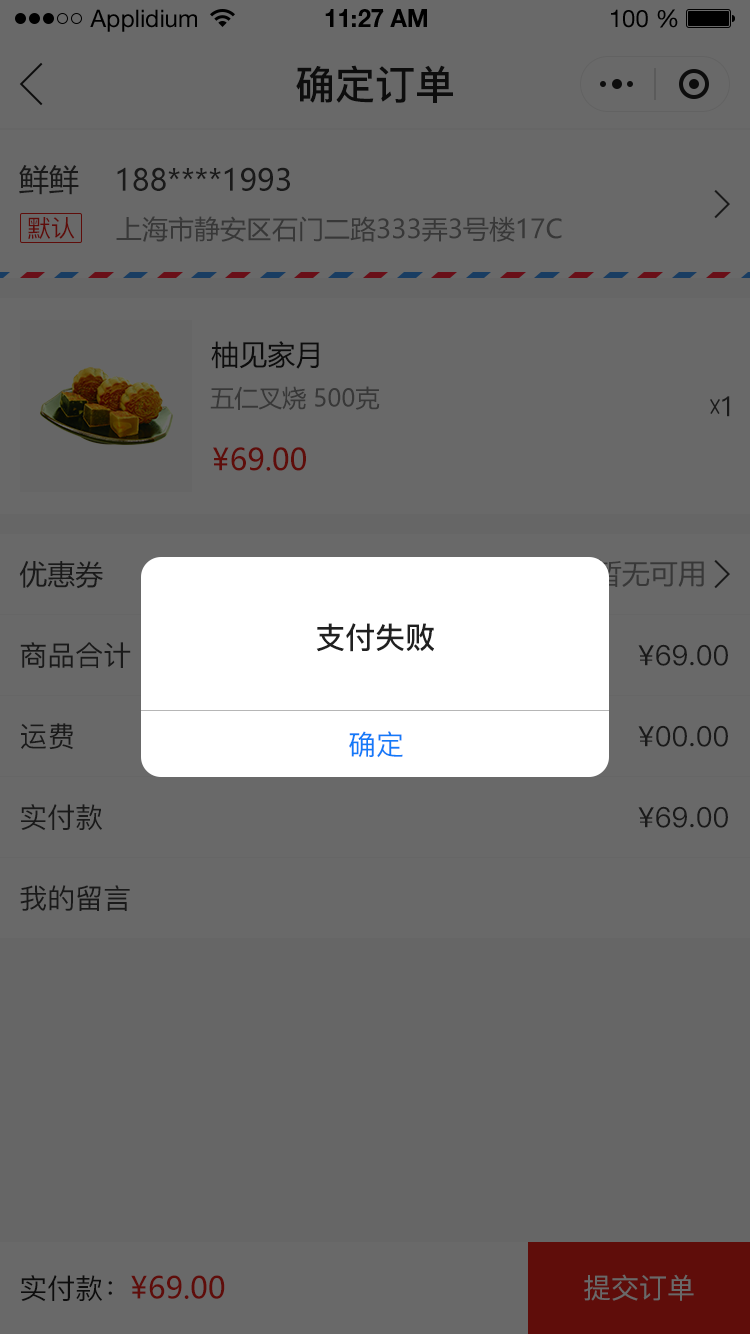
<style>
.page{position:relative;width:750px;height:1334px;background:#696969}
.page>*{position:absolute;margin:0}
.t1{font:24px "HelveticaNeueLTStd-Roman";color:#000000}
.t2{font:24px "HelveticaNeueLTStd-Bd";color:#000000}
.t3{font:40px "PingFang-SC-Bold";color:#202020;text-transform:uppercase}
.t4{font:30px "MicrosoftYaHei";color:#1a1a1a;text-transform:uppercase}
.t5{font:24px "PingFang-SC-Medium";color:#5f0d0a;text-transform:uppercase}
.t6{font:26px "MicrosoftYaHei";color:#383838;text-transform:uppercase}
.t7{font:28px "MicrosoftYaHei";color:#202020;text-transform:uppercase}
.t8{font:24px "MicrosoftYaHei";color:#383838;text-transform:uppercase}
.t9{font:28px "PingFang-SC-Medium";color:#1a1a1a;text-transform:uppercase}
.t10{font:30px "MicrosoftYaHei";color:#5f0d0a;text-transform:uppercase}
.t11{font:28px "MicrosoftYaHei";color:#1a1a1a;text-transform:uppercase}
.t12{font:30px "PingFang-SC-Bold";color:#202020;text-transform:uppercase}
.t13{font:28px "PingFang-SC-Medium";color:#137af8;text-transform:uppercase}
.t14{font:28px "PingFang-SC-Medium";color:#202020;text-transform:uppercase}
.t15{font:28px "PingFang-SC-Medium";color:#696969;text-transform:uppercase}
</style>
<div class="page">
<p class="t1" style="left:90px;top:9px;width:107px;height:23px">Applidium</p>
<p class="t2" style="left:325px;top:9px;width:102px;height:18px">11:27 AM</p>
<p class="t1" style="left:611px;top:9px;width:67px;height:19px">100 %</p>
<p class="t3" style="left:296px;top:65px;width:157px;height:38px">确定订单</p>
<p class="t4" style="left:19px;top:165px;width:60px;height:30px">鲜鲜</p>
<p class="t4" style="left:117px;top:167px;width:173px;height:24px">188****1993</p>
<p class="t5" style="left:28px;top:217px;width:47px;height:22px">默认</p>
<p class="t6" style="left:116px;top:216px;width:446px;height:26px">上海市静安区石门二路333弄3号楼17c</p>
<p class="t7" style="left:211px;top:341px;width:108px;height:28px">柚见家月</p>
<p class="t8" style="left:210px;top:386px;width:170px;height:24px">五仁叉烧 500克</p>
<p class="t9" style="left:722px;top:396px;width:8px;height:21px">1</p>
<p class="t10" style="left:213px;top:447px;width:93px;height:24px">¥69.00</p>
<p class="t11" style="left:19px;top:561px;width:84px;height:28px">优惠券</p>
<p class="t12" style="left:316px;top:623px;width:118px;height:29px">支付失败</p>
<p class="t9" style="left:20px;top:642px;width:111px;height:26px">商品合计</p>
<p class="t9" style="left:638px;top:644px;width:90px;height:22px">¥69.00</p>
<p class="t9" style="left:21px;top:723px;width:52px;height:27px">运费</p>
<p class="t9" style="left:638px;top:725px;width:90px;height:22px">¥00.00</p>
<p class="t13" style="left:349px;top:731px;width:54px;height:27px">确定</p>
<p class="t9" style="left:21px;top:804px;width:81px;height:27px">实付款</p>
<p class="t9" style="left:638px;top:806px;width:90px;height:22px">¥69.00</p>
<p class="t9" style="left:20px;top:885px;width:110px;height:26px">我的留言</p>
<p class="t14" style="left:21px;top:1275px;width:91px;height:27px">实付款：</p>
<p class="t10" style="left:131px;top:1275px;width:94px;height:24px">¥69.00</p>
<p class="t15" style="left:584px;top:1274px;width:110px;height:27px">提交订单</p>
</div>
